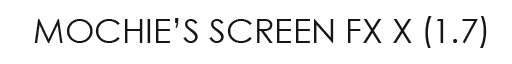
<style>
.page{position:relative;width:512px;height:64px;background:#ffffff}
.page>*{position:absolute;margin:0}
.t1{font:34px "CenturyGothic";color:#161616}
</style>
<div class="page">
<p class="t1" style="left:34px;top:18px;width:444px;height:25px">MOCHIE’S SCREEN FX X  1.7</p>
</div>
